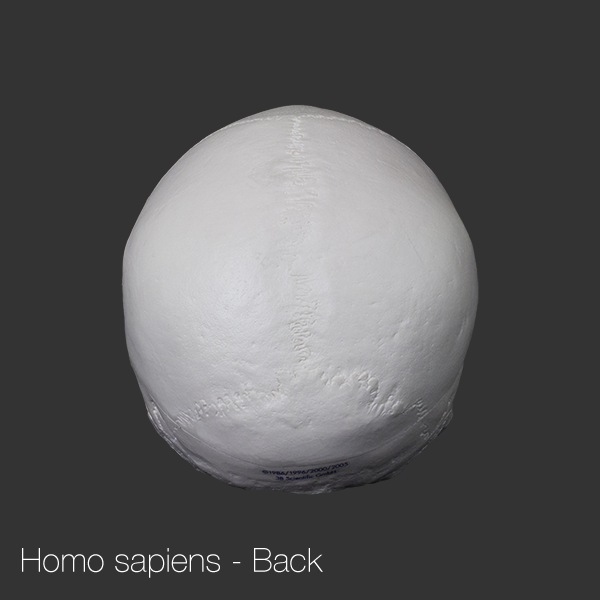
<style>
.page{position:relative;width:600px;height:600px;background:#333333}
.page>*{position:absolute;margin:0}
.t1{font:33.3px "HelveticaNeue-Thin";color:#ffffff}
</style>
<div class="page">
<p class="t1" style="left:22px;top:548px;width:301px;height:30px">Homo sapiens - Back</p>
</div>
